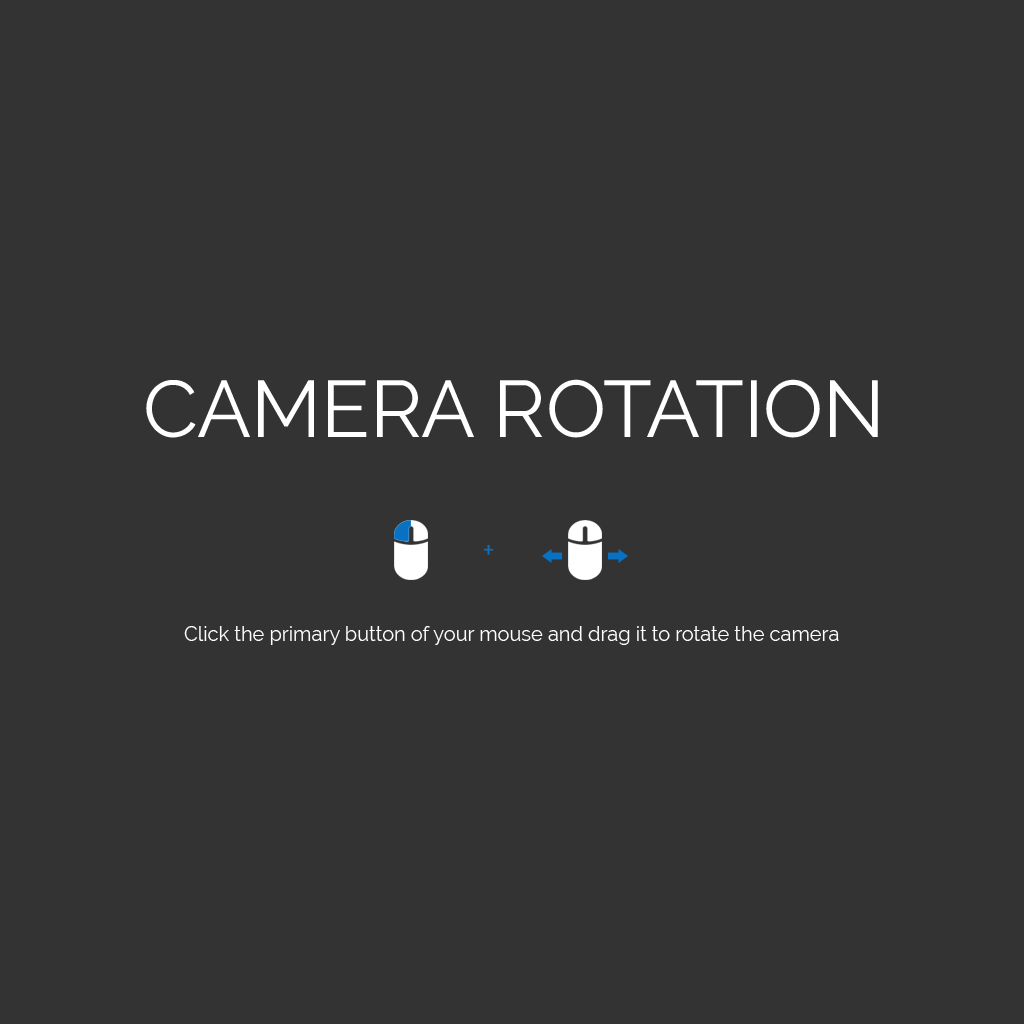
<style>
.page{position:relative;width:1024px;height:1024px;background:#333333}
.page>*{position:absolute;margin:0}
.t1{font:80px "Raleway-Regular";color:#ffffff}
.t2{font:29px "Raleway-Regular";color:#0871c2}
.t3{font:20px "Raleway-Regular";color:#ffffff}
</style>
<div class="page">
<p class="t1" style="left:146px;top:379px;width:732px;height:59px">CAMERA ROTATION</p>
<p class="t2" style="left:483px;top:544px;width:11px;height:11px">+</p>
<p class="t3" style="left:184px;top:626px;width:655px;height:19px">Click the primary button of your mouse and drag it to rotate the camera</p>
</div>
